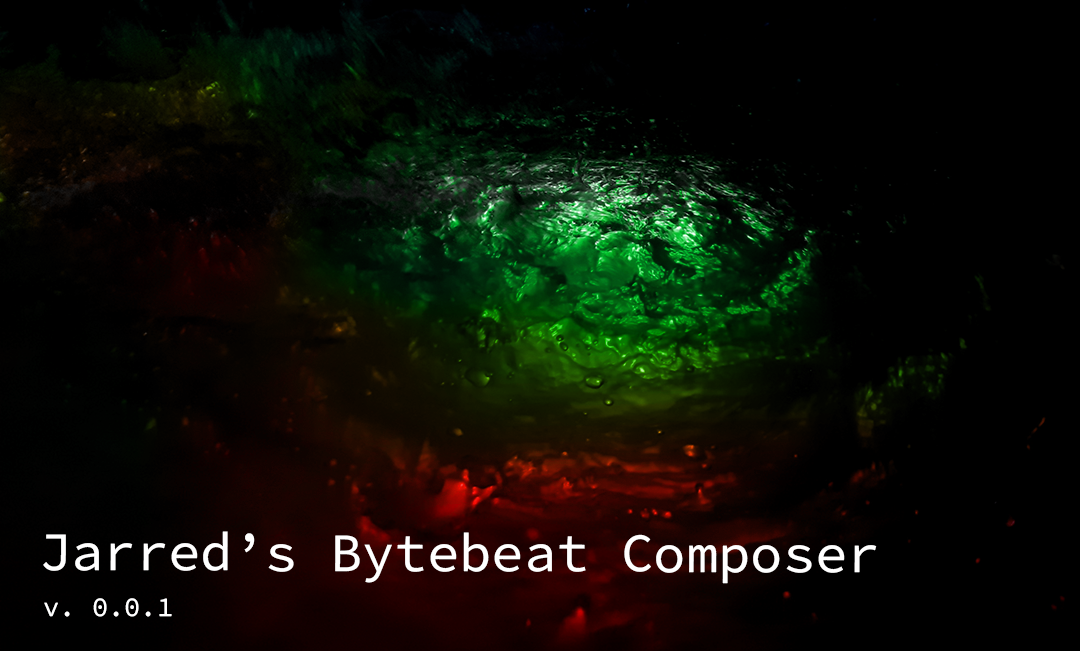
<style>
.page{position:relative;width:1080px;height:651px;background:#000000}
.page>*{position:absolute;margin:0}
.t1{font:53.9px "SourceCodePro-Regular";color:#ffffff;font-weight:bold}
.t2{font:27.1px "SourceCodePro-Regular";color:#ffffff;font-weight:bold}
</style>
<div class="page">
<p class="t1" style="left:43px;top:531px;width:834px;height:53px">Jarred’s Bytebeat Composer</p>
<p class="t2" style="left:44px;top:598px;width:128px;height:19px">v. 0.0.1</p>
</div>
